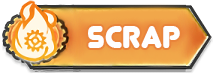
<style>
.page{position:relative;width:213px;height:75px}
.page>*{position:absolute;margin:0}
.t1{font:36px "Junegull";color:#fefefe}
</style>
<div class="page">
<p class="t1" style="left:88px;top:26px;width:92px;height:22px">SCRAP</p>
</div>
